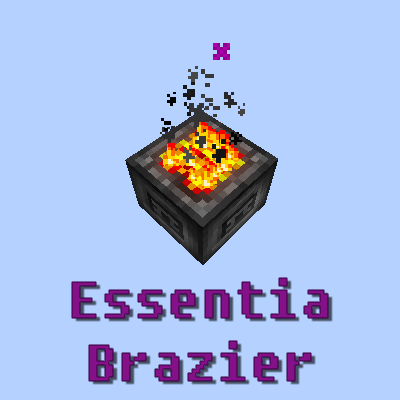
<style>
.page{position:relative;width:400px;height:400px;background:#b5d1ff}
.page>*{position:absolute;margin:0}
.t1{font:53px "Fixedsys";color:#851189}
</style>
<div class="page">
<p class="t1" style="left:72px;top:278px;width:256px;height:103px;text-align:center">Essentia<br>Brazier</p>
</div>
